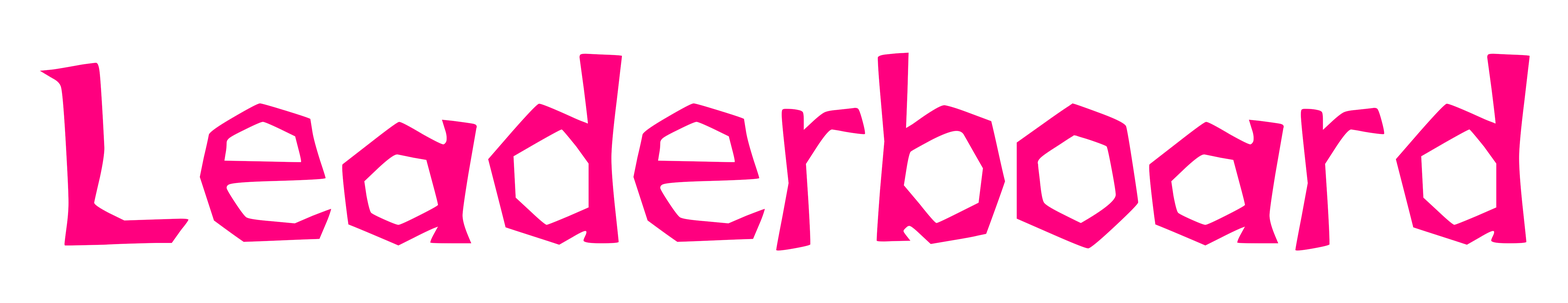
<style>
.page{position:relative;width:1568px;height:303px;background:#ffffff}
.page>*{position:absolute;margin:0}
.t1{font:362.4px "BasebrawlMain-Regular";color:#ff007f}
</style>
<div class="page">
<p class="t1" style="left:40px;top:53px;width:1490px;height:198px">Leaderboard</p>
</div>
